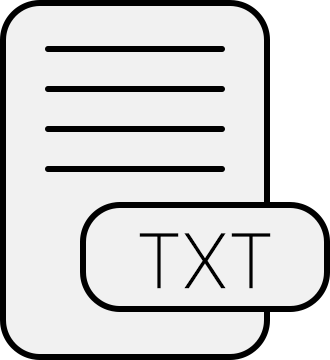
<style>
.page{position:relative;width:330px;height:360px;background:#f1f1f1}
.page>*{position:absolute;margin:0}
.t1{font:75px "Inter-ExtraLight";color:#000000}
</style>
<div class="page">
<p class="t1" style="left:139px;top:233px;width:132px;height:56px">TXT</p>
</div>
